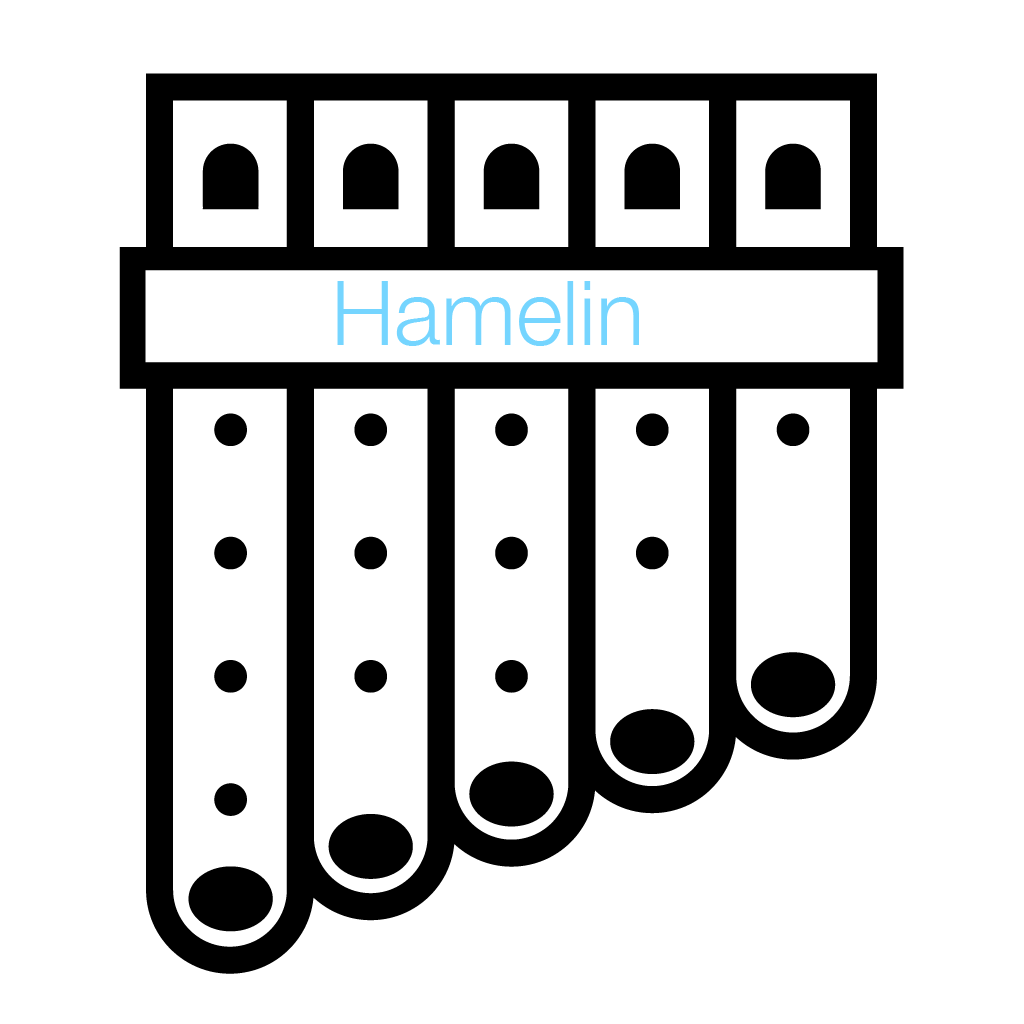
<style>
.page{position:relative;width:1024px;height:1024px;background:#ffffff}
.page>*{position:absolute;margin:0}
.t1{font:90px "HelveticaNeue-Light";color:#75d5ff}
</style>
<div class="page">
<p class="t1" style="left:337px;top:281px;width:302px;height:65px">Hamelin</p>
</div>
